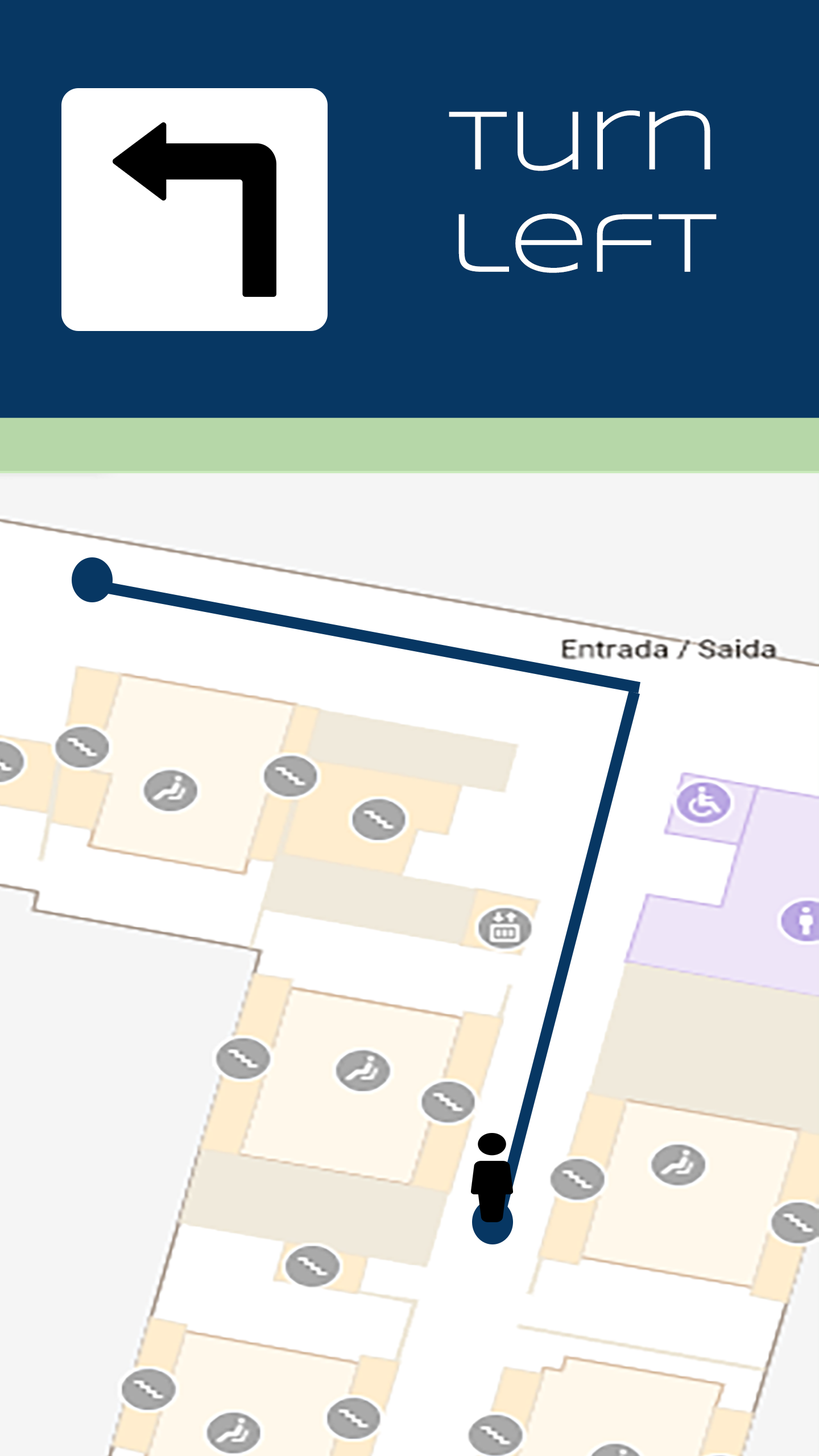
<style>
.page{position:relative;width:819px;height:1456px;background:#ffffff}
.page>*{position:absolute;margin:0}
.t1{font:85.3px "Syncopate-Regular";color:#ffffff}
</style>
<div class="page">
<p class="t1" style="left:449px;top:110px;width:268px;height:163px;text-align:center">Turn left</p>
</div>
